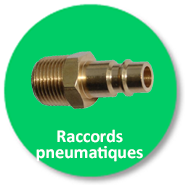
<style>
.page{position:relative;width:185px;height:185px;background:#00cc66}
.page>*{position:absolute;margin:0}
.t1{font:18px/16px "Calibri-Bold";color:#ffffff}
</style>
<div class="page">
<p class="t1" style="left:36px;top:129px;width:107px;height:33px;text-align:center">Raccords  <br>pneumatiques</p>
</div>
